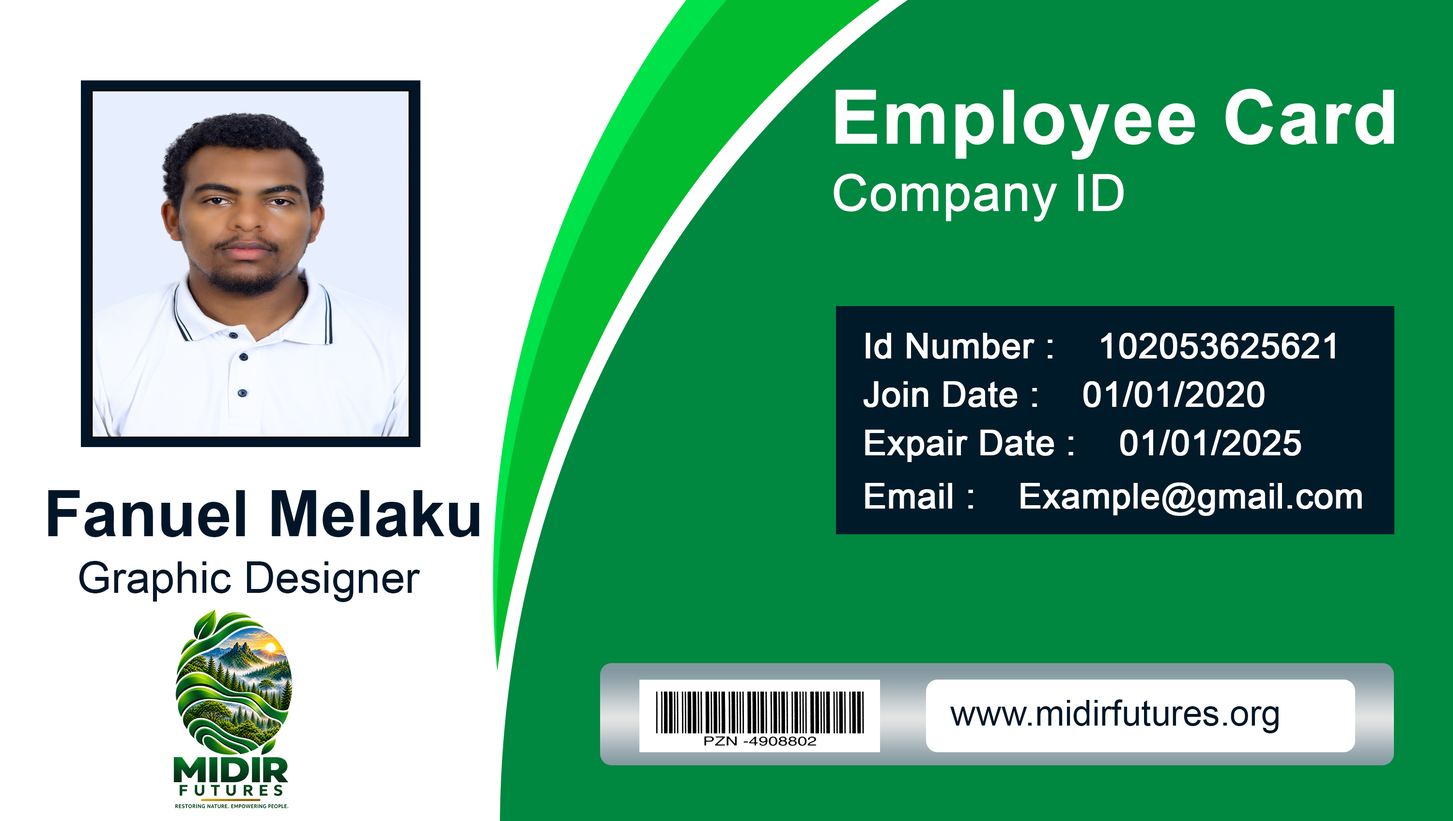
<style>
.page{position:relative;width:1453px;height:821px;background:#008740}
.page>*{position:absolute;margin:0}
.t1{font:74.7px "Arial-BoldMT";color:#ffffff;font-weight:bold}
.t2{font:50.7px "ArialMT";color:#ffffff;font-weight:bold}
.t3{font:34.8px "ArialMT";color:#ffffff;font-weight:bold}
.t4{font:63.9px "Arial-BoldMT";color:#001628}
.t5{font:44.1px "ArialMT";color:#001628}
.t6{font:35.4px "ArialMT";color:#001628}
</style>
<div class="page">
<p class="t1" style="left:835px;top:89px;width:559px;height:71px">Employee Card</p>
<p class="t2" style="left:833px;top:173px;width:290px;height:49px">Company ID</p>
<p class="t3" style="left:865px;top:333px;width:470px;height:26px">Id Number :    102053625621</p>
<p class="t3" style="left:863px;top:381px;width:401px;height:26px">Join Date :    01/01/2020</p>
<p class="t3" style="left:865px;top:430px;width:436px;height:32px">Expair Date :    01/01/2025</p>
<p class="t3" style="left:865px;top:482px;width:497px;height:34px">Email :    Example@gmail.com</p>
<p class="t4" style="left:48px;top:490px;width:431px;height:47px">Fanuel Melaku</p>
<p class="t5" style="left:79px;top:561px;width:341px;height:41px">Graphic Designer</p>
<p class="t6" style="left:950px;top:699px;width:328px;height:34px">www.midirfutures.org</p>
</div>
